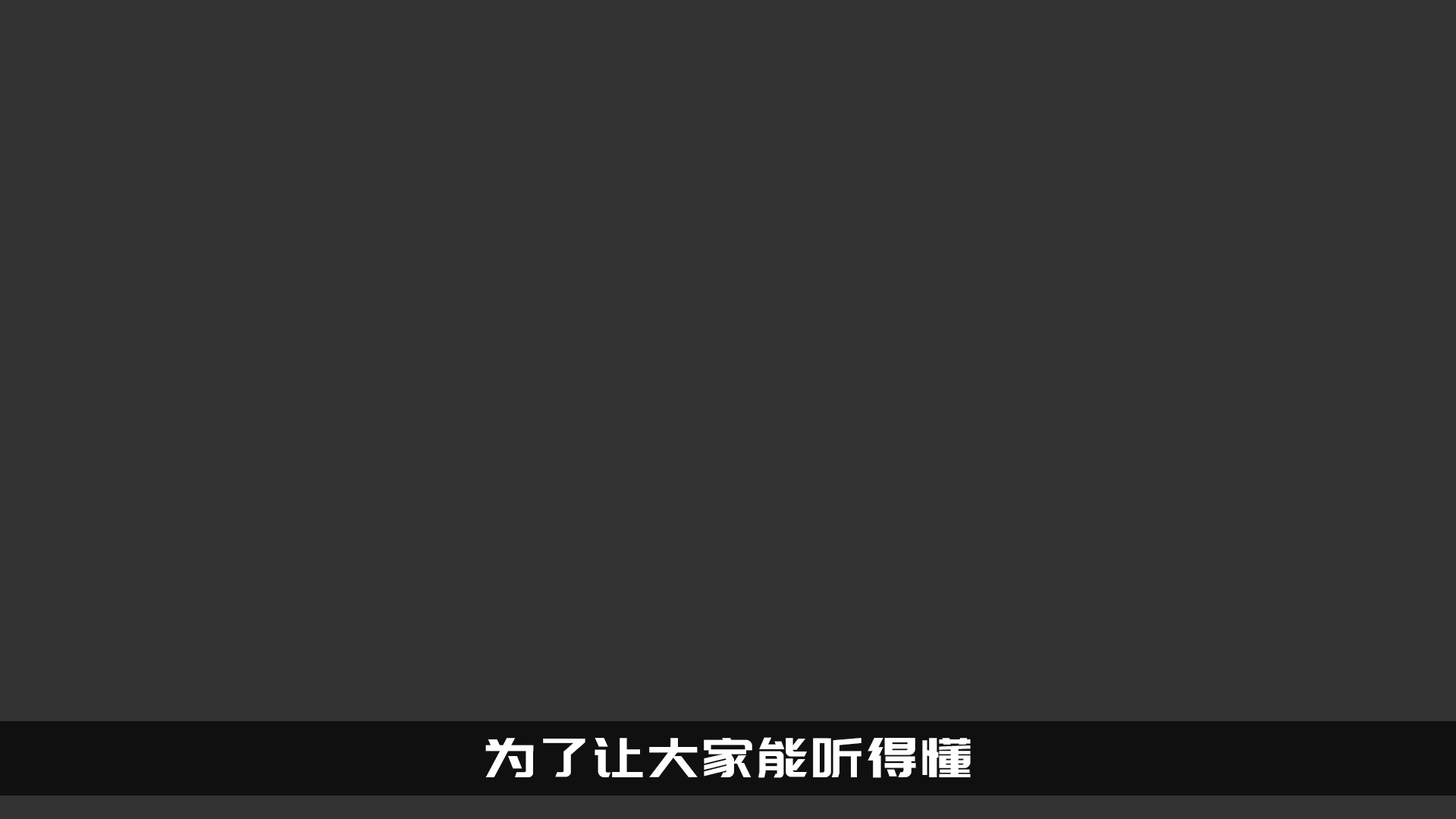
<style>
.page{position:relative;width:1456px;height:819px;background:#333333}
.page>*{position:absolute;margin:0}
.t1{font:54.6px "PangMenZhengDao-3";color:#ffffff}
</style>
<div class="page">
<p class="t1" style="left:485px;top:737px;width:486px;height:41px">为了让大家能听得懂</p>
</div>
